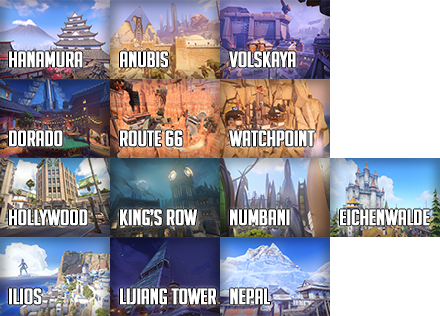
<style>
.page{position:relative;width:440px;height:316px;background:#ffffff}
.page>*{position:absolute;margin:0}
.t1{font:21.8px "BigNoodleTitling";letter-spacing:-0.02em;color:#ffffff;font-weight:bold;scale:1.05 1}
</style>
<div class="page">
<p class="t1" style="left:9px;top:51px;width:74px;height:17px">Hanamura</p>
<p class="t1" style="left:120px;top:51px;width:48px;height:17px">Anubis</p>
<p class="t1" style="left:229px;top:51px;width:67px;height:17px">Volskaya</p>
<p class="t1" style="left:9px;top:130px;width:54px;height:17px">Dorado</p>
<p class="t1" style="left:120px;top:130px;width:63px;height:17px">Route 66</p>
<p class="t1" style="left:229px;top:130px;width:86px;height:17px">Watchpoint</p>
<p class="t1" style="left:9px;top:209px;width:79px;height:17px">Hollywood</p>
<p class="t1" style="left:120px;top:209px;width:77px;height:17px">King’s row</p>
<p class="t1" style="left:230px;top:209px;width:60px;height:17px">Numbani</p>
<p class="t1" style="left:340px;top:209px;width:90px;height:17px">Eichenwalde</p>
<p class="t1" style="left:9px;top:288px;width:33px;height:17px">Ilios</p>
<p class="t1" style="left:120px;top:288px;width:96px;height:17px">Lijiang tower</p>
<p class="t1" style="left:230px;top:288px;width:40px;height:17px">Nepal</p>
</div>
